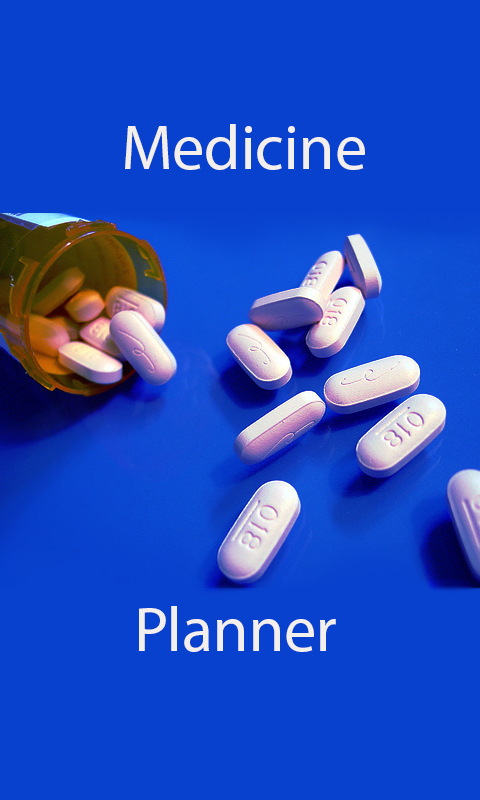
<style>
.page{position:relative;width:480px;height:800px;background:#0841cd}
.page>*{position:absolute;margin:0}
.t1{font:64px "MyriadPro-Regular";color:#f2efed}
</style>
<div class="page">
<p class="t1" style="left:125px;top:124px;width:240px;height:46px">Medicine</p>
<p class="t1" style="left:139px;top:606px;width:197px;height:46px">Planner</p>
</div>
